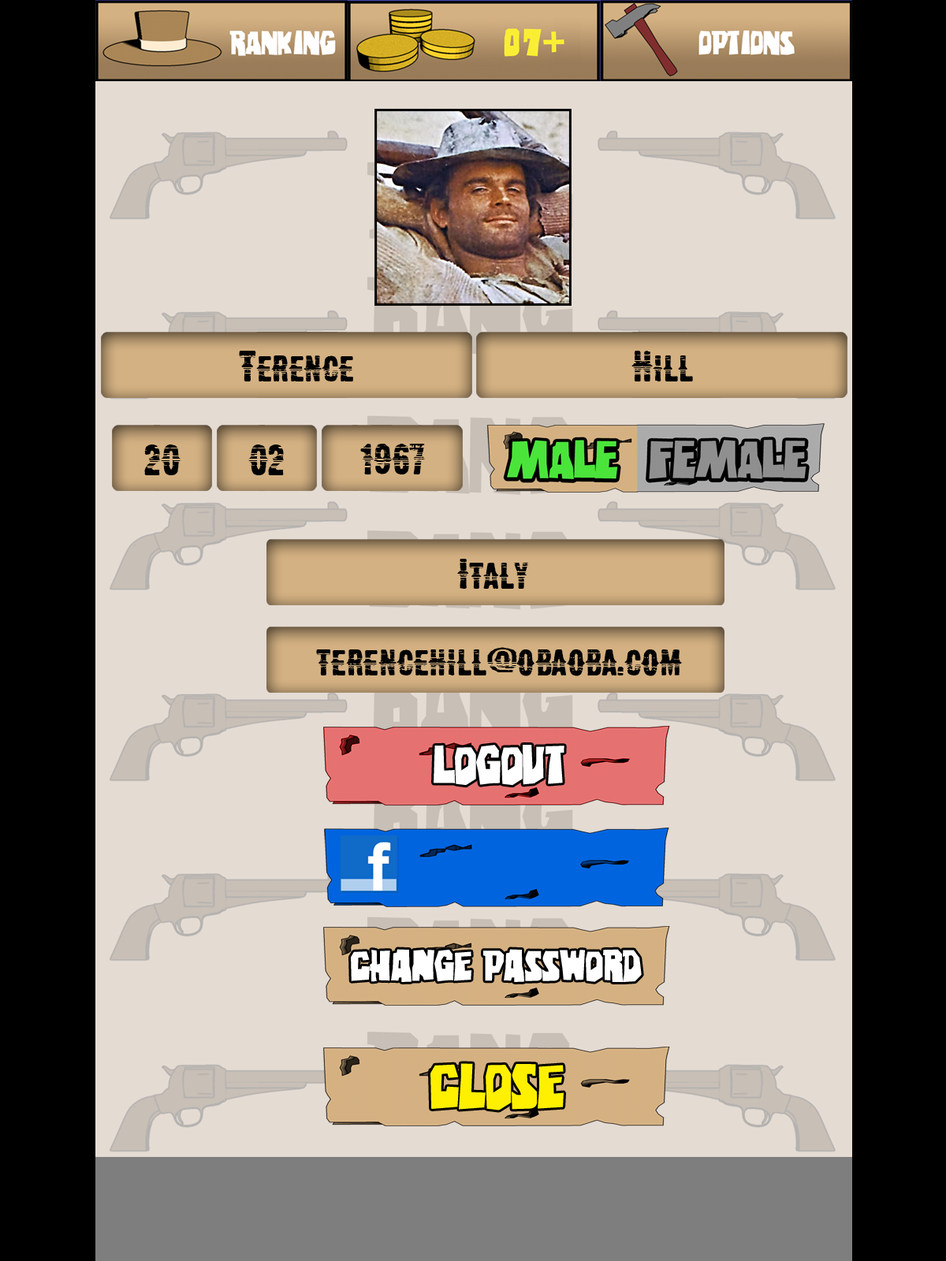
<style>
.page{position:relative;width:946px;height:1261px;background:#e4dbd3}
.page>*{position:absolute;margin:0}
.t1{font:37.8px "CMWesternWoodblockNo2";color:#030303}
.t2{font:47.3px "Eastwood";color:#ffffff}
.t3{font:37.8px "Eastwood";color:#ffffff}
.t4{font:56.7px "Eastwood";color:#fff000}
</style>
<div class="page">
<p class="t1" style="left:239px;top:351px;width:114px;height:30px">Terence</p>
<p class="t1" style="left:631px;top:351px;width:62px;height:30px">Hill</p>
<p class="t1" style="left:144px;top:444px;width:36px;height:31px">20</p>
<p class="t1" style="left:248px;top:444px;width:36px;height:31px">02</p>
<p class="t1" style="left:360px;top:444px;width:65px;height:30px">1967</p>
<p class="t1" style="left:457px;top:559px;width:71px;height:30px">Italy</p>
<p class="t1" style="left:316px;top:647px;width:366px;height:29px">terencehill@obaoba.com</p>
<p class="t2" style="left:433px;top:745px;width:131px;height:41px">Logout</p>
<p class="t3" style="left:351px;top:949px;width:290px;height:33px">Change Password</p>
<p class="t4" style="left:430px;top:1063px;width:133px;height:47px">Close</p>
</div>
